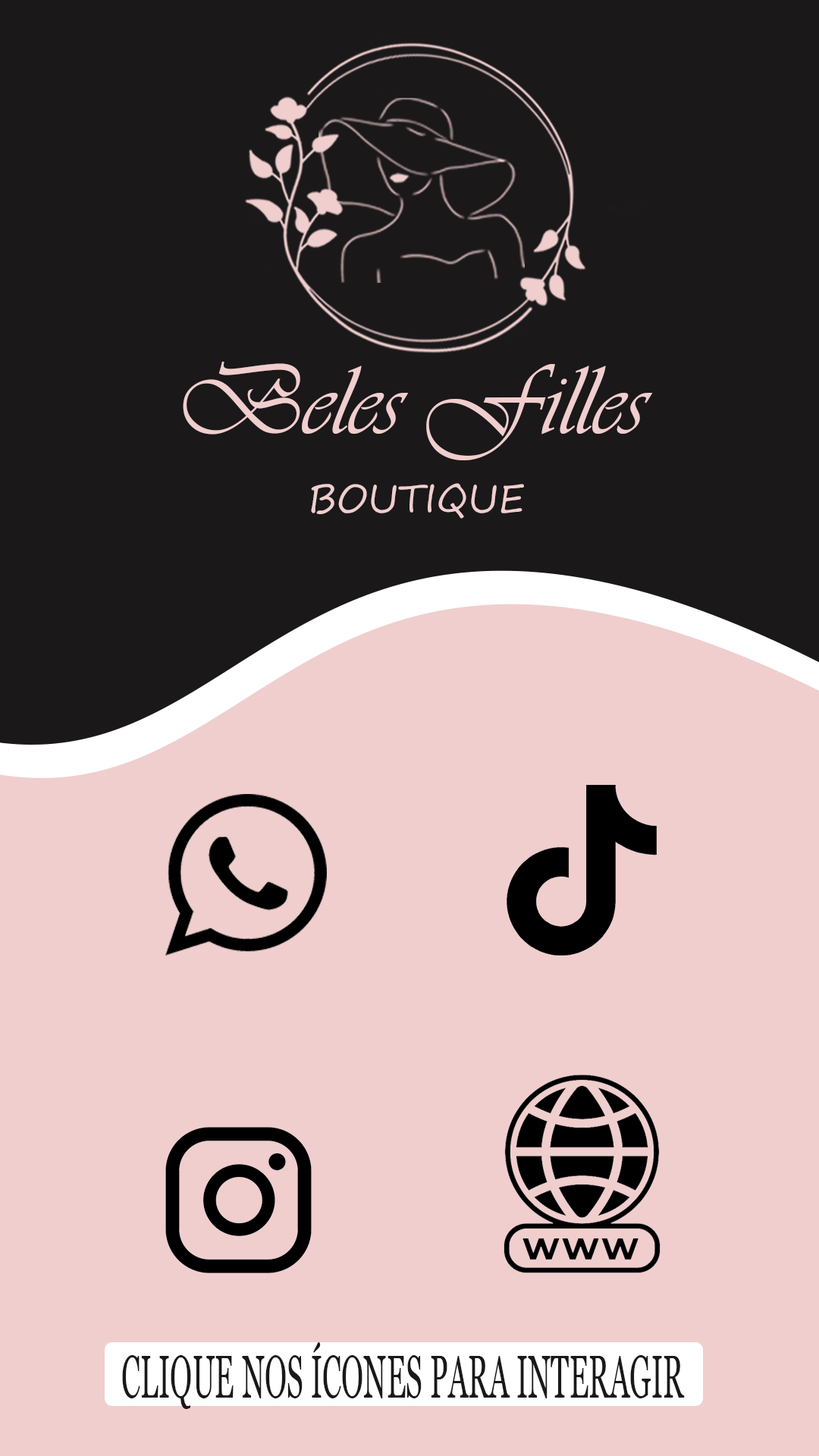
<style>
.page{position:relative;width:819px;height:1456px;background:#f0cece}
.page>*{position:absolute;margin:0}
.t1{font:101.8px "Vivaldii";color:#f0cece}
.t2{font:38.6px "SegoePrint";color:#f0cece}
.t3{font:60.8px "Georgia";color:#1a1819;scale:0.49 1}
</style>
<div class="page">
<p class="t1" style="left:183px;top:361px;width:470px;height:99px">Beles Filles</p>
<p class="t2" style="left:311px;top:483px;width:213px;height:36px">BOUTIQUE</p>
<p class="t3" style="left:122px;top:1342px;width:563px;height:67px">CLIQUE NOS ÍCONES PARA INTERAGIR</p>
</div>
